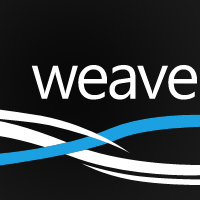
<style>
.page{position:relative;width:200px;height:200px}
.page>*{position:absolute;margin:0}
.t1{font:66px "SegoeWP";letter-spacing:-0.05em;color:#ffffff}
</style>
<div class="page">
<p class="t1" style="left:31px;top:65px;width:166px;height:35px">weave</p>
</div>
